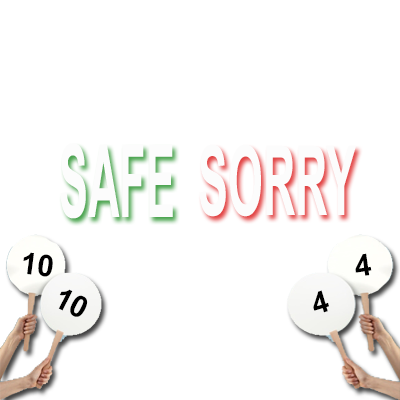
<style>
.page{position:relative;width:400px;height:400px;background:#ffffff}
.page>*{position:absolute;margin:0}
.t1{font:101.3px "Arial-BoldMT";color:#fcfcfc;scale:0.43 1}
.t2{font:96.4px "Arial-BoldMT";color:#fcfcfc;scale:0.47 1}
.t3{font:30px "Arial-BoldMT";color:#000000}
</style>
<div class="page">
<p class="t1" style="left:60px;top:143px;width:113px;height:76px">SAFE</p>
<p class="t2" style="left:199px;top:144px;width:157px;height:73px">SORRY</p>
<p class="t3" style="left:23px;top:252px;width:30px;height:25px;rotate:7deg">10</p>
<p class="t3" style="left:355px;top:253px;width:17px;height:23px;rotate:-8deg">4</p>
<p class="t3" style="left:58px;top:289px;width:30px;height:28px;rotate:27deg">10</p>
<p class="t3" style="left:313px;top:290px;width:16px;height:23px;rotate:-17deg">4</p>
</div>
